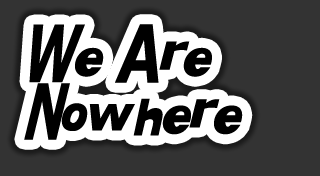
<style>
.page{position:relative;width:320px;height:176px;background:#333333}
.page>*{position:absolute;margin:0}
.t1{font:48px "KittyKatt";color:#000000}
</style>
<div class="page">
<p class="t1" style="left:24px;top:24px;width:219px;height:116px">We Are Nowhere</p>
</div>
